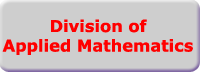
<style>
.page{position:relative;width:200px;height:72px;background:#cecece}
.page>*{position:absolute;margin:0}
.t1{font:16.3px "Verdana-Bold";color:#ff0000}
</style>
<div class="page">
<p class="t1" style="left:2px;top:19px;width:191px;height:36px;text-align:center">Division of<br>Applied Mathematics</p>
</div>
